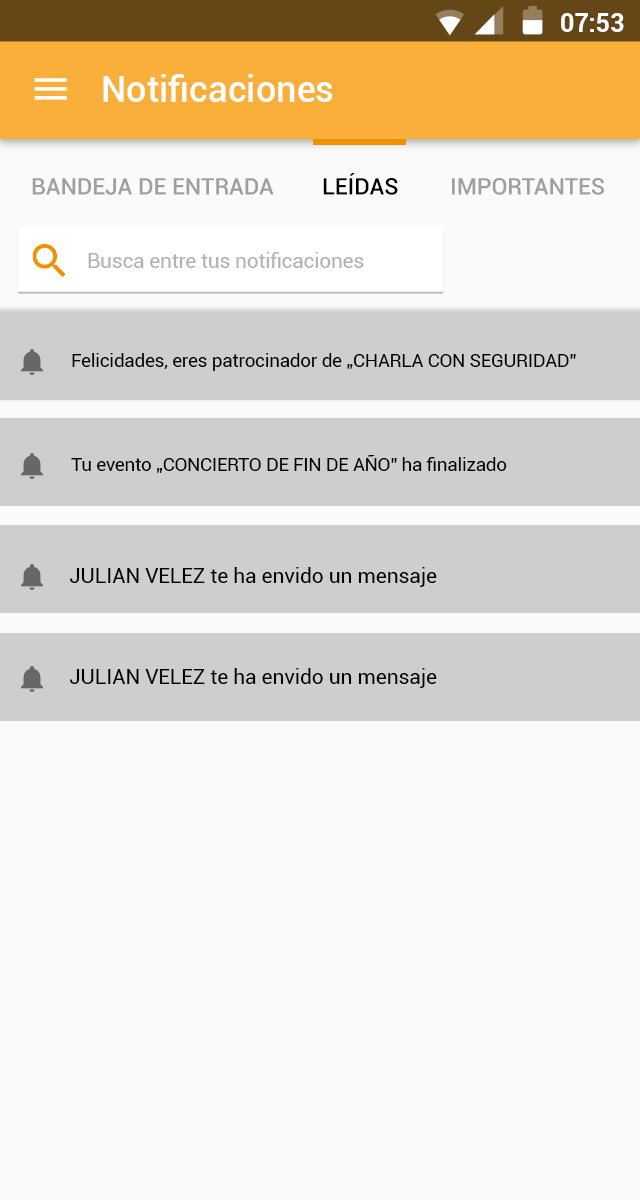
<style>
.page{position:relative;width:640px;height:1200px;background:#fafafa}
.page>*{position:absolute;margin:0}
.t1{font:24.9px "Roboto-Bold";color:#ffffff}
.t2{font:35.8px "Roboto-Medium";letter-spacing:0.005em;color:#ffffff}
.t3{font:22.9px "Roboto-Medium";color:#000000}
.t4{font:22.9px "Roboto-Medium";color:#9f9f9f}
.t5{font:20.8px "Roboto-Regular";letter-spacing:-0.01em;color:#b1b1b1}
.t6{font:18.8px "Roboto-Regular";letter-spacing:-0.01em;color:#000000}
.t7{font:21.2px "Roboto-Regular";letter-spacing:-0.01em;color:#000000}
</style>
<div class="page">
<p class="t1" style="left:561px;top:13px;width:63px;height:19px">07:53</p>
<p class="t2" style="left:103px;top:74px;width:230px;height:28px">Notificaciones</p>
<p class="t3" style="left:323px;top:173px;width:75px;height:22px">LEÍDAS</p>
<p class="t4" style="left:32px;top:178px;width:242px;height:17px">BANDEJA DE ENTRADA</p>
<p class="t4" style="left:452px;top:178px;width:152px;height:17px">IMPORTANTES</p>
<p class="t5" style="left:88px;top:252px;width:276px;height:16px">Busca entre tus notificaciones</p>
<p class="t6" style="left:72px;top:353px;width:504px;height:18px">Felicidades, eres patrocinador de „CHARLA CON SEGURIDAD”</p>
<p class="t6" style="left:71px;top:455px;width:436px;height:18px">Tu evento „CONCIERTO DE FIN DE AÑO” ha finalizado</p>
<p class="t7" style="left:70px;top:567px;width:367px;height:20px">JULIAN VELEZ te ha envido un mensaje</p>
<p class="t7" style="left:70px;top:668px;width:367px;height:20px">JULIAN VELEZ te ha envido un mensaje</p>
</div>
